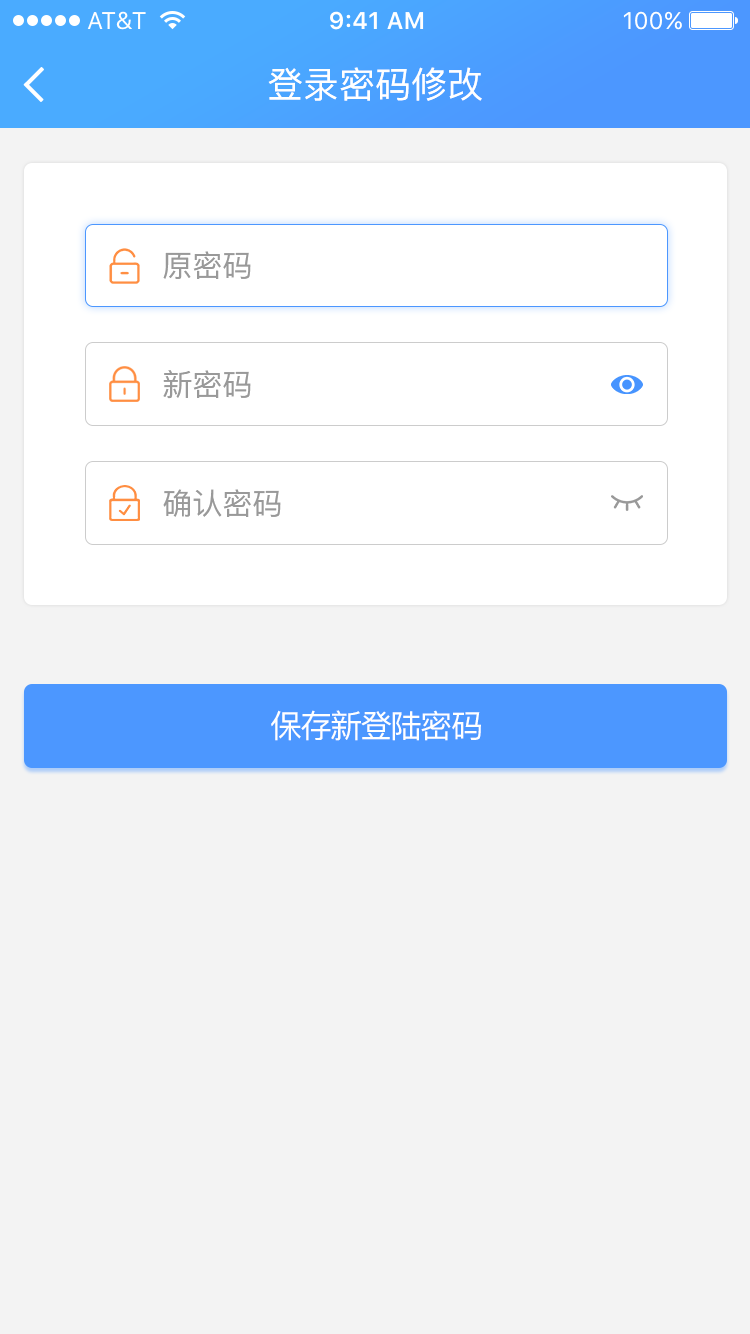
<style>
.page{position:relative;width:750px;height:1334px;background:#f3f3f3}
.page>*{position:absolute;margin:0}
.t1{font:36px "PingFang-SC-Medium";color:#ffffff}
.t2{font:30px "PingFang-SC-Medium";color:#999999}
.t3{font:32px "PingFang-SC-Medium";letter-spacing:-0.06em;color:#ffffff}
</style>
<div class="page">
<p class="t1" style="left:268px;top:67px;width:214px;height:34px">登录密码修改</p>
<p class="t2" style="left:163px;top:251px;width:88px;height:28px">原密码</p>
<p class="t2" style="left:163px;top:370px;width:88px;height:29px">新密码</p>
<p class="t2" style="left:163px;top:489px;width:118px;height:28px">确认密码</p>
<p class="t3" style="left:271px;top:710px;width:210px;height:31px">保存新登陆密码</p>
</div>
